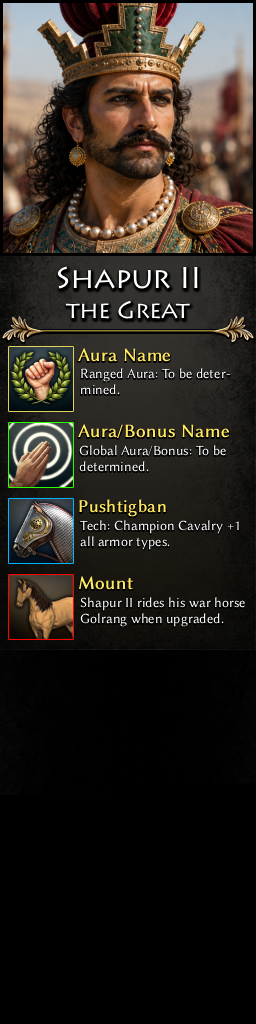
<style>
.page{position:relative;width:256px;height:1024px;background:#000000}
.page>*{position:absolute;margin:0}
.t1{font:30px/30px "Lithos";letter-spacing:-0.02em;color:#ffffff}
.t2{font:24px/30px "Lithos";letter-spacing:-0.02em;color:#ffffff}
.t3{font:19px "LinBiolinumO";color:#ffe963;font-weight:bold}
.t4{font:14px "LinBiolinumO";color:#ffffff}
.t5{font:18px "LinBiolinumO";color:#ffe963;font-weight:bold}
</style>
<div class="page">
<p class="t1" style="left:57px;top:266px;width:141px;height:53px;text-align:center">Shapur II<br><span class="t2">the Great</span></p>
<p class="t3" style="left:78px;top:348px;width:93px;height:14px">Aura Name</p>
<p class="t4" style="left:81px;top:368px;width:150px;height:27px">Ranged Aura: To be deter-<br>mined.</p>
<p class="t3" style="left:78px;top:424px;width:152px;height:15px">Aura/Bonus Name</p>
<p class="t4" style="left:79px;top:445px;width:147px;height:27px">Global Aura/Bonus: To be<br>determined.</p>
<p class="t5" style="left:79px;top:499px;width:87px;height:18px">Pushtigban</p>
<p class="t4" style="left:80px;top:520px;width:159px;height:30px">Tech: Champion Cavalry +1<br>all armor types.</p>
<p class="t3" style="left:78px;top:576px;width:55px;height:14px">Mount</p>
<p class="t4" style="left:80px;top:597px;width:165px;height:30px">Shapur II rides his war horse <br>Golrang when upgraded.</p>
</div>
